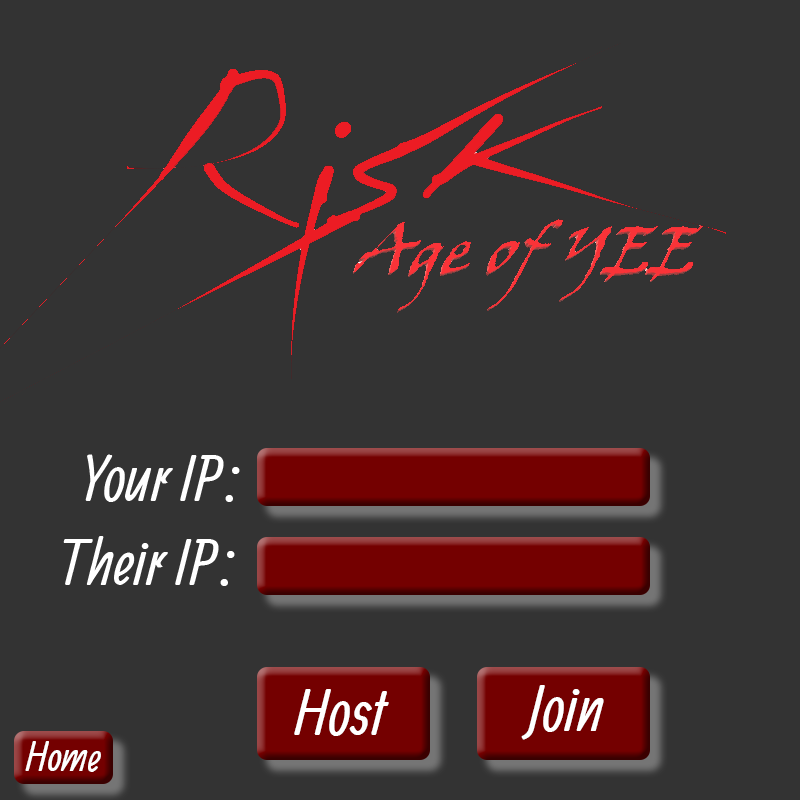
<style>
.page{position:relative;width:800px;height:800px;background:#333333}
.page>*{position:absolute;margin:0}
.t1{font:64px "Allan-Regular";color:#ffffff}
.t2{font:41.4px "Allan-Regular";color:#ffffff}
</style>
<div class="page">
<p class="t1" style="left:85px;top:454px;width:155px;height:48px">Your IP:</p>
<p class="t1" style="left:63px;top:536px;width:172px;height:50px">Their IP:</p>
<p class="t1" style="left:294px;top:689px;width:95px;height:47px">Host</p>
<p class="t1" style="left:521px;top:685px;width:83px;height:55px">Join</p>
<p class="t2" style="left:25px;top:741px;width:76px;height:31px">Home</p>
</div>
